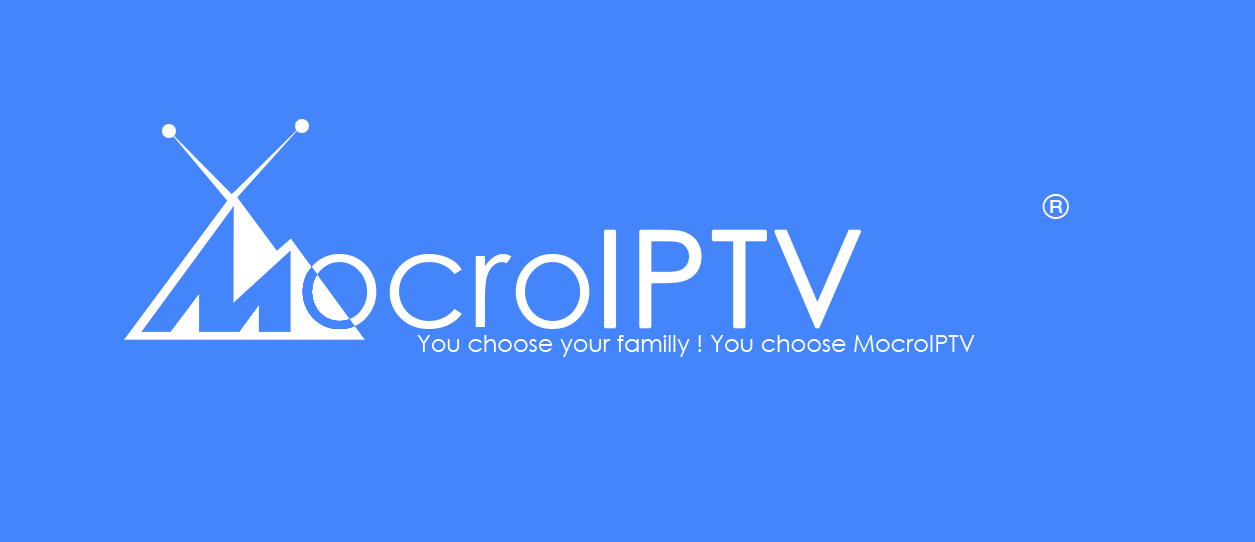
<style>
.page{position:relative;width:1255px;height:542px;background:#4485fc}
.page>*{position:absolute;margin:0}
.t1{font:34px "CenturyGothic";color:#ffffff}
.t2{font:132.7px "CenturyGothic";color:#ffffff}
.t3{font:132.7px "CenturyGothic";color:#ffffff;font-weight:bold}
.t4{font:23.8px "CenturyGothic";color:#ffffff}
</style>
<div class="page">
<p class="t1" style="left:1042px;top:194px;width:27px;height:25px">®</p>
<p class="t2" style="left:302px;top:229px;width:560px;height:100px">ocro<span class="t3">IPTV</span></p>
<p class="t4" style="left:417px;top:335px;width:558px;height:22px">You choose your familly ! You choose MocroIPTV</p>
</div>
